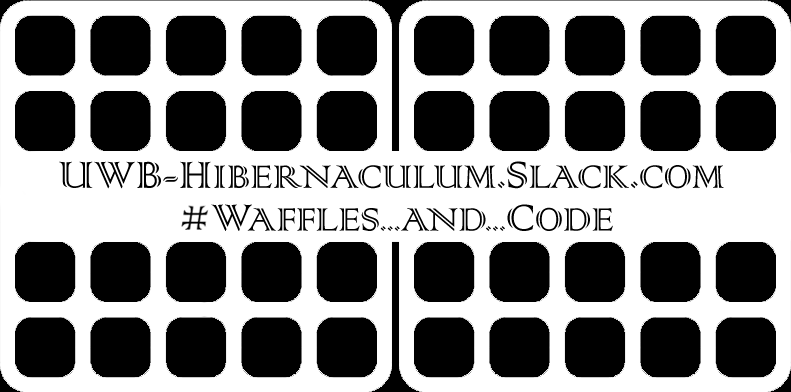
<style>
.page{position:relative;width:791px;height:392px;background:#ffffff}
.page>*{position:absolute;margin:0}
.t1{font:42.7px/39.1px "ColonnaMT";color:#000000}
.t2{font:49.8px/39.1px "ColonnaMT";color:#000000}
.t3{font:42.7px/42.7px "ColonnaMT";color:#000000}
.t4{font:49.8px/42.7px "ColonnaMT";color:#000000}
.t5{font:35.6px/42.7px "ColonnaMT";color:#000000}
</style>
<div class="page">
<p class="t1" style="left:59px;top:161px;width:665px;height:70px;text-align:center"><span class="t2">UWB-H</span>IBERNACUL<span class="t3">UM</span><span class="t4">.S</span><span class="t3">LACK</span><span class="t4">.</span><span class="t3">COM<br>    </span><span class="t4">W</span><span class="t3">AFFLES</span><span class="t5">...</span><span class="t3">AND</span><span class="t5">...</span><span class="t4">C</span><span class="t3">ODE</span></p>
</div>
